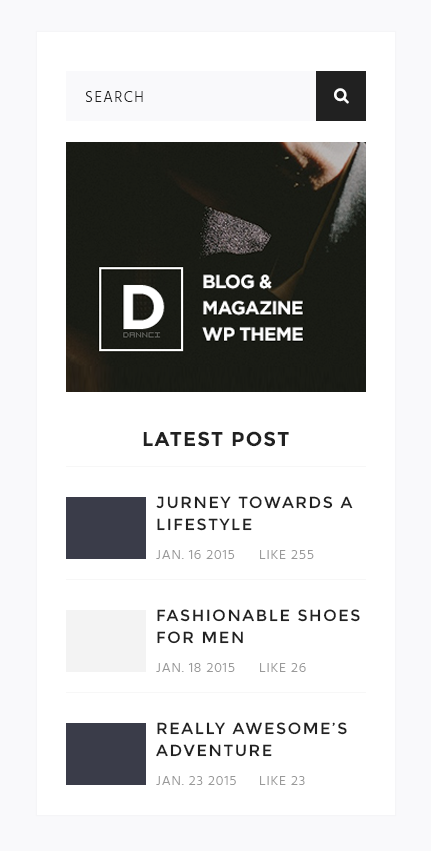
<style>
.page{position:relative;width:431px;height:851px;background:#ffffff}
.page>*{position:absolute;margin:0}
.t1{font:15px "Hind-Light";letter-spacing:0.1em;color:#212121;text-transform:uppercase}
.t2{font:20px "Montserrat-Bold";letter-spacing:0.06em;color:#212121;text-transform:uppercase}
.t3{font:16px/22px "Montserrat-Regular";letter-spacing:0.1em;color:#212121;text-transform:uppercase}
.t4{font:14px "Hind-Light";letter-spacing:0.06em;color:#999999;text-transform:uppercase}
</style>
<div class="page">
<p class="t1" style="left:86px;top:91px;width:57px;height:11px">Search</p>
<p class="t2" style="left:143px;top:431px;width:146px;height:16px">Latest Post</p>
<p class="t3" style="left:156px;top:496px;width:197px;height:35px">jurney towards a<br>lifestyle</p>
<p class="t4" style="left:156px;top:550px;width:79px;height:9px">Jan. 16 2015</p>
<p class="t4" style="left:260px;top:550px;width:54px;height:9px">Like 255</p>
<p class="t3" style="left:157px;top:609px;width:203px;height:35px">Fashionable shoes<br>for men</p>
<p class="t4" style="left:156px;top:663px;width:79px;height:9px">Jan. 18 2015</p>
<p class="t4" style="left:260px;top:663px;width:46px;height:9px">Like 26</p>
<p class="t3" style="left:156px;top:722px;width:191px;height:35px">really awesome’s <br>Adventure</p>
<p class="t4" style="left:156px;top:776px;width:80px;height:9px">Jan. 23 2015</p>
<p class="t4" style="left:260px;top:776px;width:45px;height:9px">Like 23</p>
</div>
